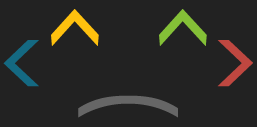
<style>
.page{position:relative;width:257px;height:127px;background:#222222}
.page>*{position:absolute;margin:0}
.t1{font:112.5px "Cabin-Regular";color:#146982}
.t2{font:112.5px "Cabin-Regular";color:#ffc10e}
.t3{font:112.5px "Cabin-Regular";color:#84c037}
.t4{font:112.5px "Cabin-Regular";color:#bf4740}
.t5{font:112.6px "Cabin-Regular";color:#666666}
</style>
<div class="page">
<p class="t1" style="left:3px;top:9px;width:250px;height:78px">&lt;<span class="t2">^  </span><span class="t3">^</span><span class="t4">&gt;</span></p>
<p class="t5" style="left:78px;top:95px;width:100px;height:23px;rotate:90deg">(</p>
</div>
